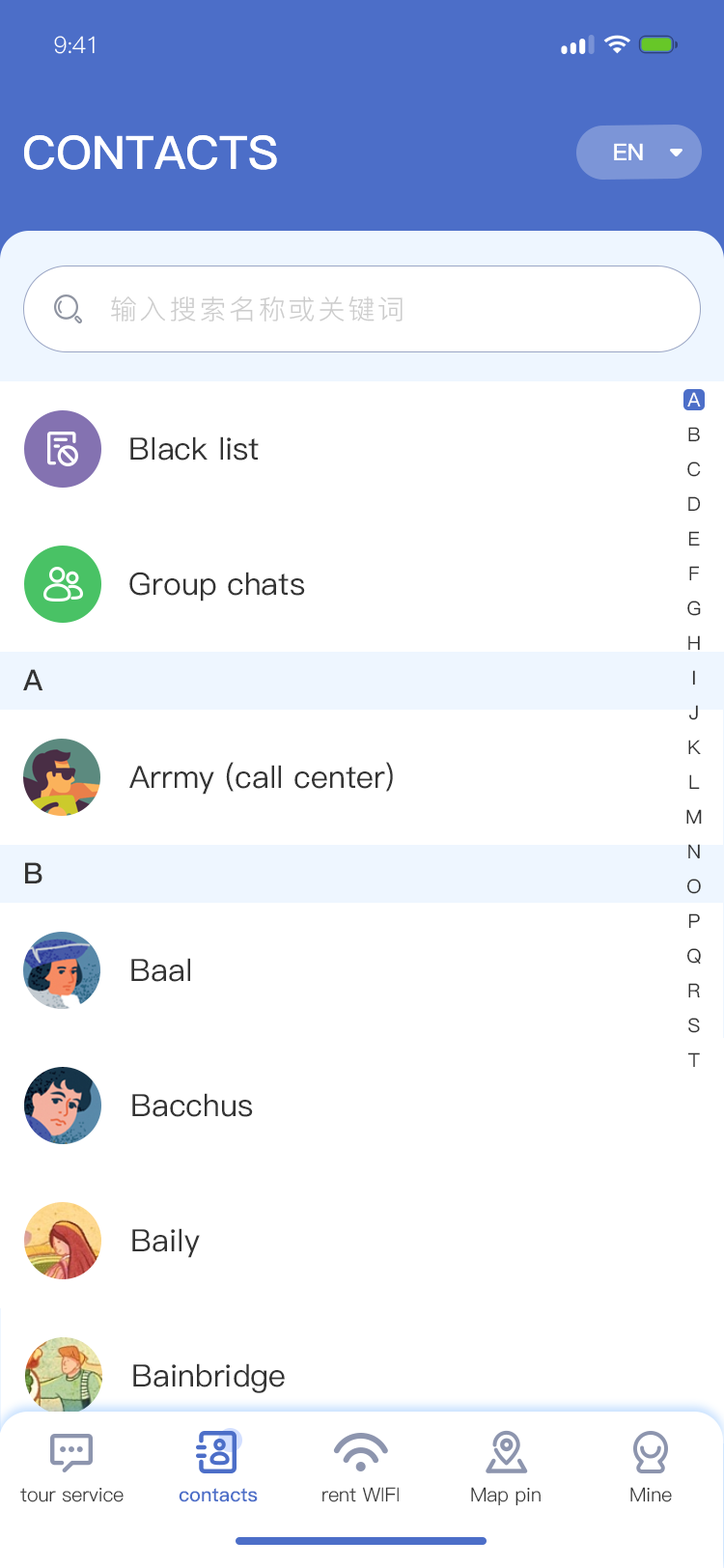
<style>
.page{position:relative;width:724px;height:1568px;background:#ffffff}
.page>*{position:absolute;margin:0}
.t1{font:23.2px "PingFang-SC-Regular";letter-spacing:-0.025em;color:#ffffff}
.t2{font:46.3px "PingFang-SC-Bold";color:#ffffff;text-transform:uppercase}
.t3{font:23.2px "PingFang-SC-Bold";color:#ffffff}
.t4{font:27px "PingFang-SC-Regular";letter-spacing:0.1em;color:#cccccc}
.t5{font:19.3px/34.8px "PingFang-SC-Medium";color:#333333}
.t6{font:19.3px/34.8px "PingFang-SC-Medium";color:#ffffff}
.t7{font:30.9px "PingFang-SC-Medium";color:#333333}
.t8{font:29px "PingFang-SC-Bold";letter-spacing:-0.04em;color:#333333}
.t9{font:19.3px "PingFang-SC-Regular";color:#333333}
.t10{font:19.3px "PingFang-SC-Bold";color:#4c6ec8}
</style>
<div class="page">
<p class="t1" style="left:54px;top:36px;width:41px;height:18px">9:41</p>
<p class="t2" style="left:24px;top:135px;width:253px;height:35px">contacts</p>
<p class="t3" style="left:614px;top:143px;width:29px;height:17px">EN</p>
<p class="t4" style="left:111px;top:296px;width:292px;height:26px">输入搜索名称或关键词</p>
<p class="t5" style="left:686px;top:392px;width:16px;height:675px;text-align:center"><span class="t6">A<br></span>B<br>C<br>D<br>E<br>F<br>G<br>H<br>I<br>J<br>K<br>L<br>M<br>N<br>O<br>P<br>Q<br>R<br>S<br>T</p>
<p class="t7" style="left:130px;top:436px;width:129px;height:25px">Black list</p>
<p class="t7" style="left:129px;top:572px;width:176px;height:30px">Group chats</p>
<p class="t8" style="left:23px;top:669px;width:20px;height:21px">A</p>
<p class="t7" style="left:129px;top:762px;width:264px;height:33px">Arrmy (call center)</p>
<p class="t8" style="left:25px;top:862px;width:17px;height:21px">B</p>
<p class="t7" style="left:131px;top:958px;width:59px;height:24px">Baal</p>
<p class="t7" style="left:132px;top:1093px;width:121px;height:24px">Bacchus</p>
<p class="t7" style="left:132px;top:1228px;width:68px;height:30px">Baily</p>
<p class="t7" style="left:133px;top:1363px;width:152px;height:30px">Bainbridge</p>
<p class="t9" style="left:20px;top:1487px;width:104px;height:15px">tour service</p>
<p class="t10" style="left:179px;top:1488px;width:79px;height:14px">contacts</p>
<p class="t9" style="left:322px;top:1487px;width:77px;height:15px">rent WIFI</p>
<p class="t9" style="left:471px;top:1487px;width:70px;height:19px">Map pin</p>
<p class="t9" style="left:630px;top:1487px;width:42px;height:15px">Mine</p>
</div>
